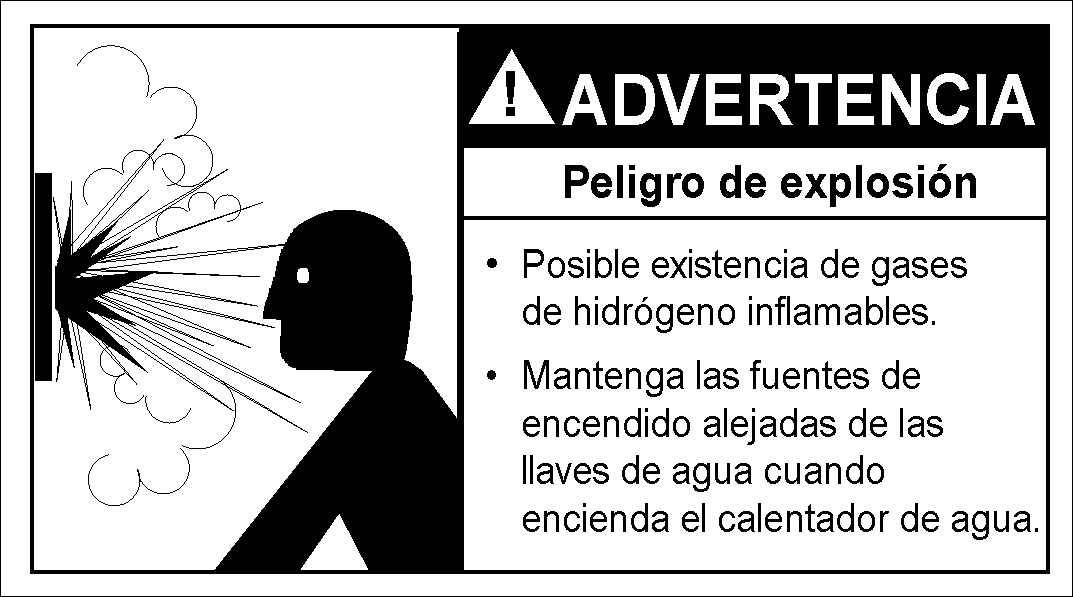
<style>
.page{position:relative;width:1073px;height:597px;background:#ffffff}
.page>*{position:absolute;margin:0}
.t1{font:70.8px "Arial-BoldMT";color:#ffffff;scale:0.93 1}
.t2{font:45.8px "Arial-BoldMT";color:#000000;scale:0.93 1}
.t3{font:39.6px "ArialMT";color:#000000;scale:0.93 1}
.t4{font:41.7px "ArialMT";color:#000000;scale:0.93 1}
</style>
<div class="page">
<p class="t1" style="left:562px;top:73px;width:473px;height:52px">ADVERTENCIA</p>
<p class="t2" style="left:565px;top:164px;width:411px;height:43px">Peligro de explosión</p>
<p class="t3" style="left:487px;top:249px;width:551px;height:291px;text-align:justify"><span class="t4">• </span>Posible existencia de gases    de hidrógeno inflamables.<br>• Mantenga las fuentes de     encendido alejadas de las    llaves de agua cuando      encienda el calentador de agua.</p>
</div>
